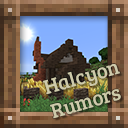
<style>
.page{position:relative;width:128px;height:128px}
.page>*{position:absolute;margin:0}
.t1{font:20.8px "BreeSerif-Regular";color:#cecaaa}
</style>
<div class="page">
<p class="t1" style="left:43px;top:64px;width:78px;height:55px;rotate:-16deg">Halcyon<br>Rumors</p>
</div>
